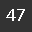
<style>
.page{position:relative;width:32px;height:32px;background:#333333}
.page>*{position:absolute;margin:0}
.t1{font:17.8px "MyriadPro-Regular";color:#ffffff;scale:1.12 1}
</style>
<div class="page">
<p class="t1" style="left:6px;top:9px;width:19px;height:12px">47</p>
</div>
